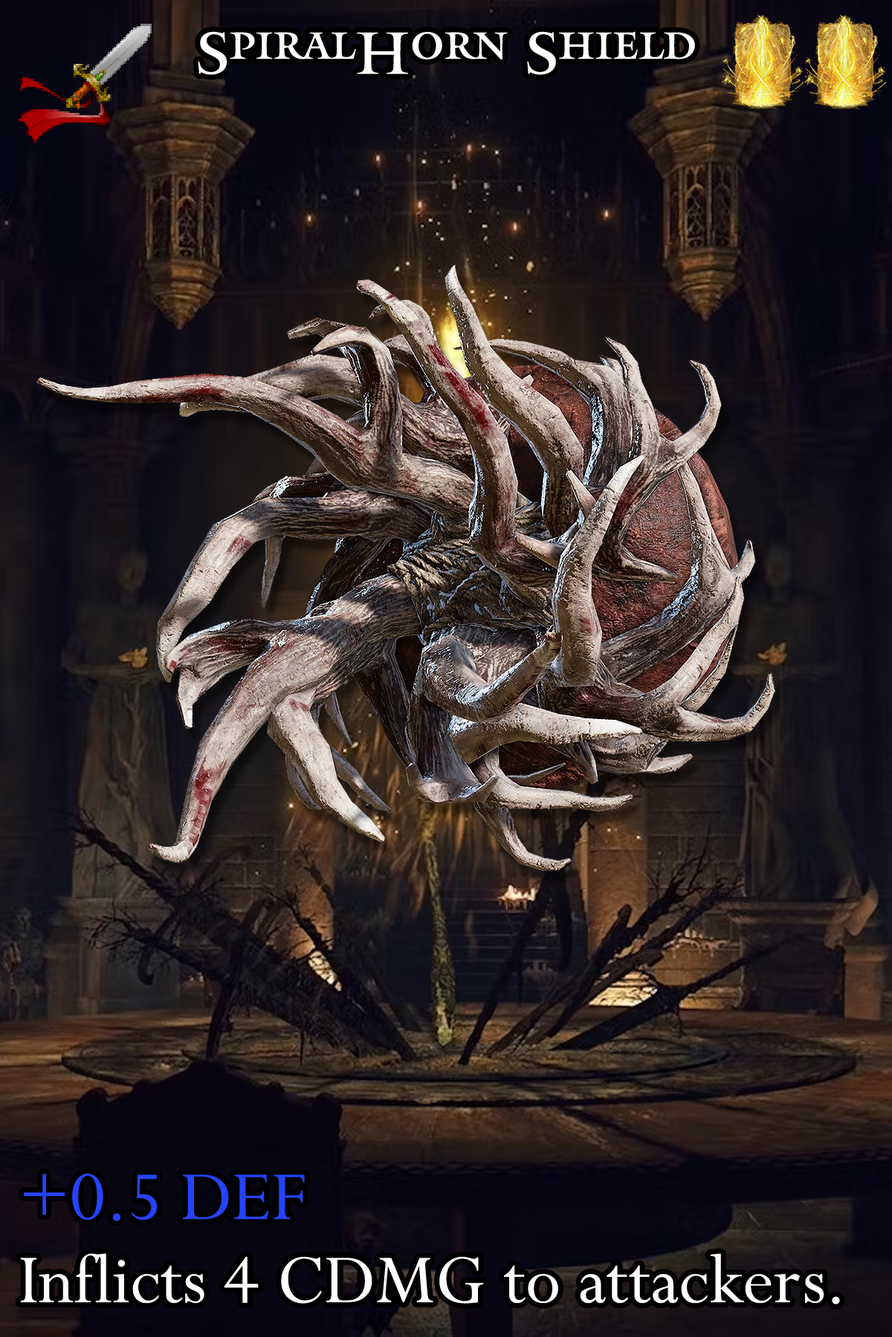
<style>
.page{position:relative;width:892px;height:1337px}
.page>*{position:absolute;margin:0}
.t1{font:101px "Mantinia";color:#ffffff}
.t2{font:132.3px/83.2px "Perpetua";color:#ffffff}
.t3{font:132.3px/83.2px "Perpetua";color:#2443ff}
</style>
<div class="page">
<p class="t1" style="left:198px;top:31px;width:497px;height:44px">SpiralHorn Shield</p>
<p class="t2" style="left:20px;top:1174px;width:820px;height:131px"><span class="t3">+0.5 DEF<br></span>Inflicts 4 CDMG to attackers.</p>
</div>
